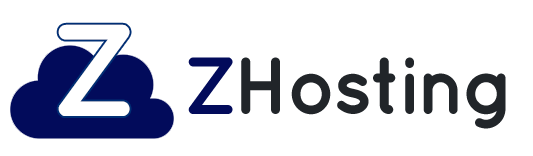
<style>
.page{position:relative;width:533px;height:156px;background:#ffffff}
.page>*{position:absolute;margin:0}
.t1{font:130.1px "Quicksand-Bold";letter-spacing:-0.06em;color:#ffffff}
.t2{font:80.8px "Quicksand-Bold";letter-spacing:-0.05em;color:#212529}
.t3{font:80.8px "Quicksand-Bold";letter-spacing:-0.05em;color:#020b5b}
</style>
<div class="page">
<p class="t1" style="left:58px;top:24px;width:72px;height:92px">Z</p>
<p class="t2" style="left:188px;top:57px;width:318px;height:72px"><span class="t3">Z</span>Hosting</p>
</div>
